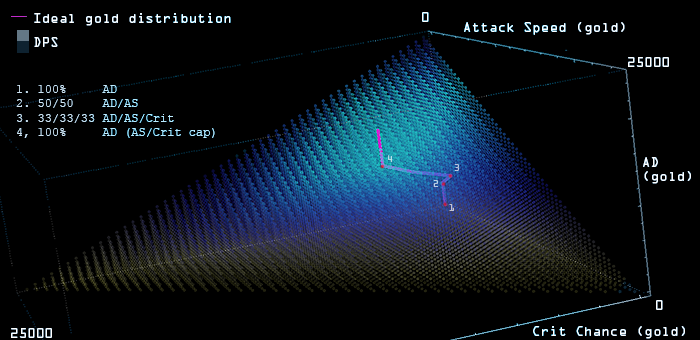
<style>
.page{position:relative;width:700px;height:340px;background:#000000}
.page>*{position:absolute;margin:0}
.t1{font:12px "OCRAStd";color:#ffffff}
.t2{font:12px "CourierNewPSMT";color:#bdebff}
</style>
<div class="page">
<p class="t1" style="left:34px;top:13px;width:197px;height:13px">Ideal gold distribution</p>
<p class="t1" style="left:422px;top:12px;width:7px;height:10px">0</p>
<p class="t1" style="left:464px;top:22px;width:161px;height:13px">Attack Speed (gold)</p>
<p class="t1" style="left:34px;top:37px;width:24px;height:10px">DPS</p>
<p class="t1" style="left:628px;top:57px;width:41px;height:10px">25000</p>
<p class="t2" style="left:16px;top:85px;width:199px;height:53px">1. 100%     AD<br>2. 50/50    AD/AS<br>3. 33/33/33 AD/AS/Crit<br>4, 100%     AD (AS/Crit cap)</p>
<p class="t1" style="left:643px;top:157px;width:48px;height:27px">AD<br>(gold)</p>
<p class="t1" style="left:656px;top:300px;width:7px;height:10px">0</p>
<p class="t1" style="left:11px;top:328px;width:41px;height:10px">25000</p>
<p class="t1" style="left:533px;top:326px;width:152px;height:13px">Crit Chance (gold)</p>
</div>
